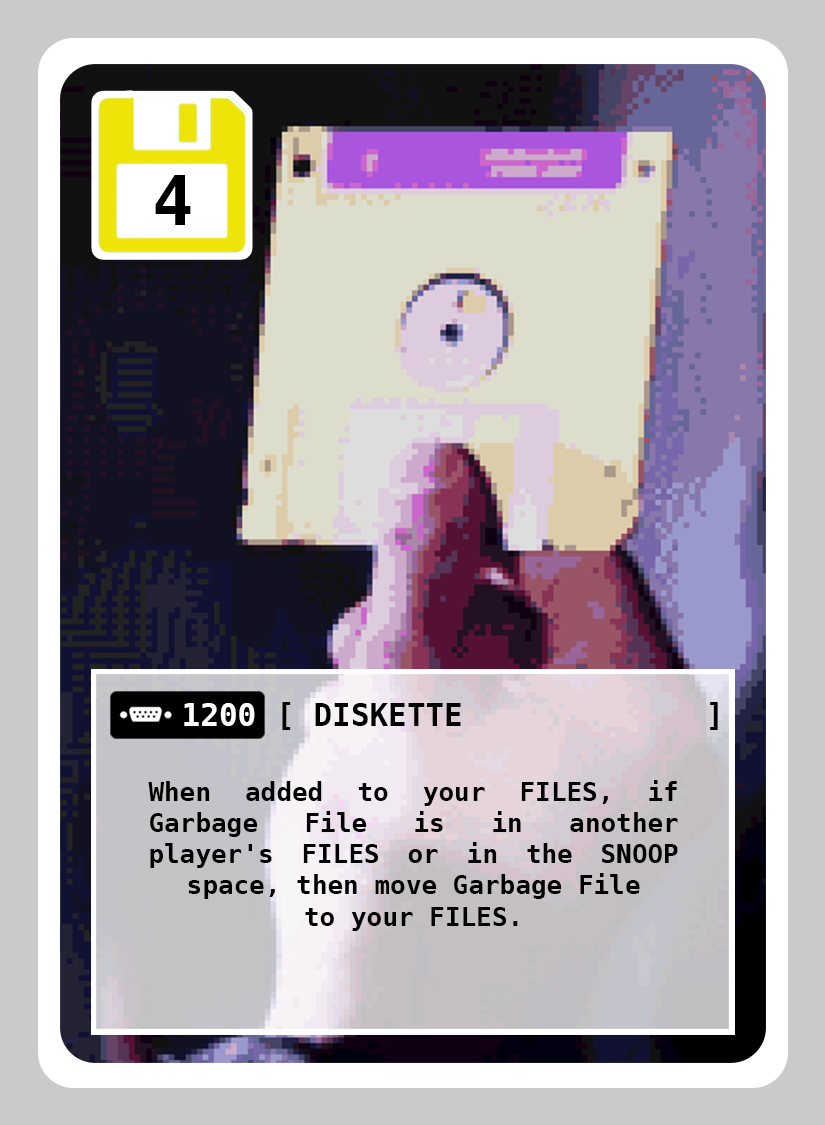
<style>
.page{position:relative;width:825px;height:1125px}
.page>*{position:absolute;margin:0}
.t1{font:69px "DejaVuSansMono-Bold";color:#000000}
.t2{font:31px "DejaVuSansMono-Bold";color:#ffffff}
.t3{font:31px "DejaVuSansMono-Bold";color:#000000}
.t4{font:26px "DejaVuSansMono-Bold";color:#000000}
</style>
<div class="page">
<p class="t1" style="left:155px;top:175px;width:36px;height:50px">4</p>
<p class="t2" style="left:184px;top:703px;width:71px;height:23px">1200</p>
<p class="t3" style="left:315px;top:703px;width:146px;height:23px">DISKETTE</p>
<p class="t4" style="left:148px;top:780px;width:530px;height:151px;text-align:justify">When added to your FILES, if Garbage File is in another player's FILES or in the SNOOP space, then move Garbage File<br>to your FILES.</p>
</div>
